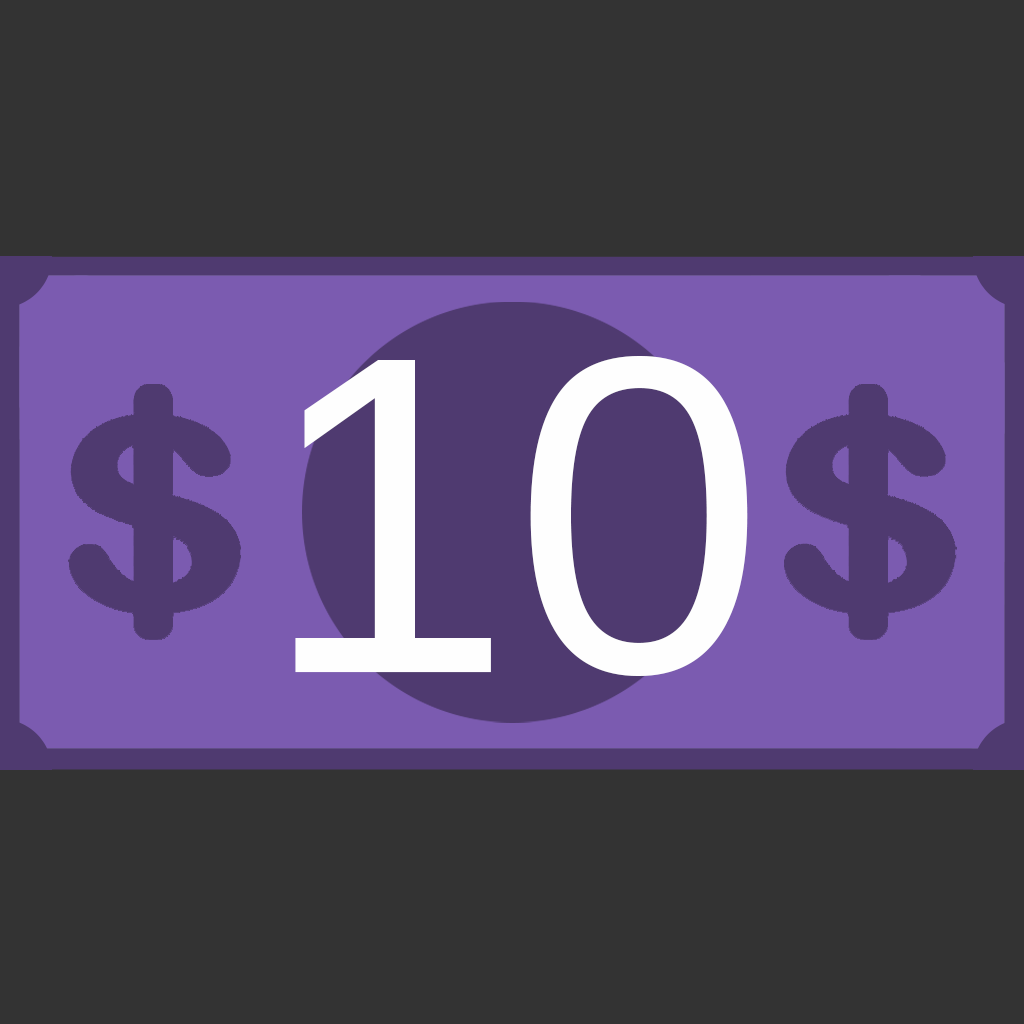
<style>
.page{position:relative;width:1024px;height:1024px;background:#333333}
.page>*{position:absolute;margin:0}
.t1{font:453px "LiberationSans";color:#fefefe}
</style>
<div class="page">
<p class="t1" style="left:295px;top:356px;width:453px;height:320px">10</p>
</div>
